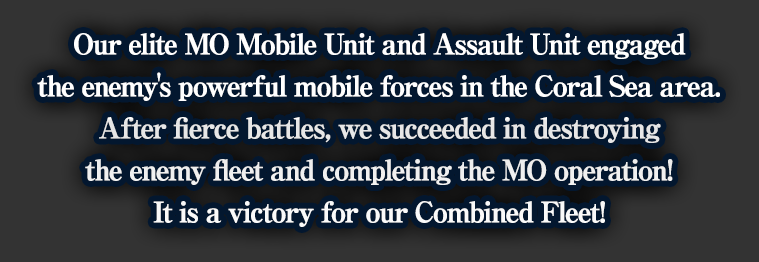
<style>
.page{position:relative;width:759px;height:262px;background:#03172f}
.page>*{position:absolute;margin:0}
.t1{font:28px/42px "RyuminPro-ExBold";letter-spacing:-0.08em;color:#ffffff;font-weight:bold}
</style>
<div class="page">
<p class="t1" style="left:37px;top:33px;width:683px;height:194px;text-align:center">Our elite MO Mobile Unit and Assault Unit engaged<br>the enemy's powerful mobile forces in the Coral Sea area.<br>After fierce battles, we succeeded in destroying<br>the enemy fleet and completing the MO operation!<br>It is a victory for our Combined Fleet!</p>
</div>
